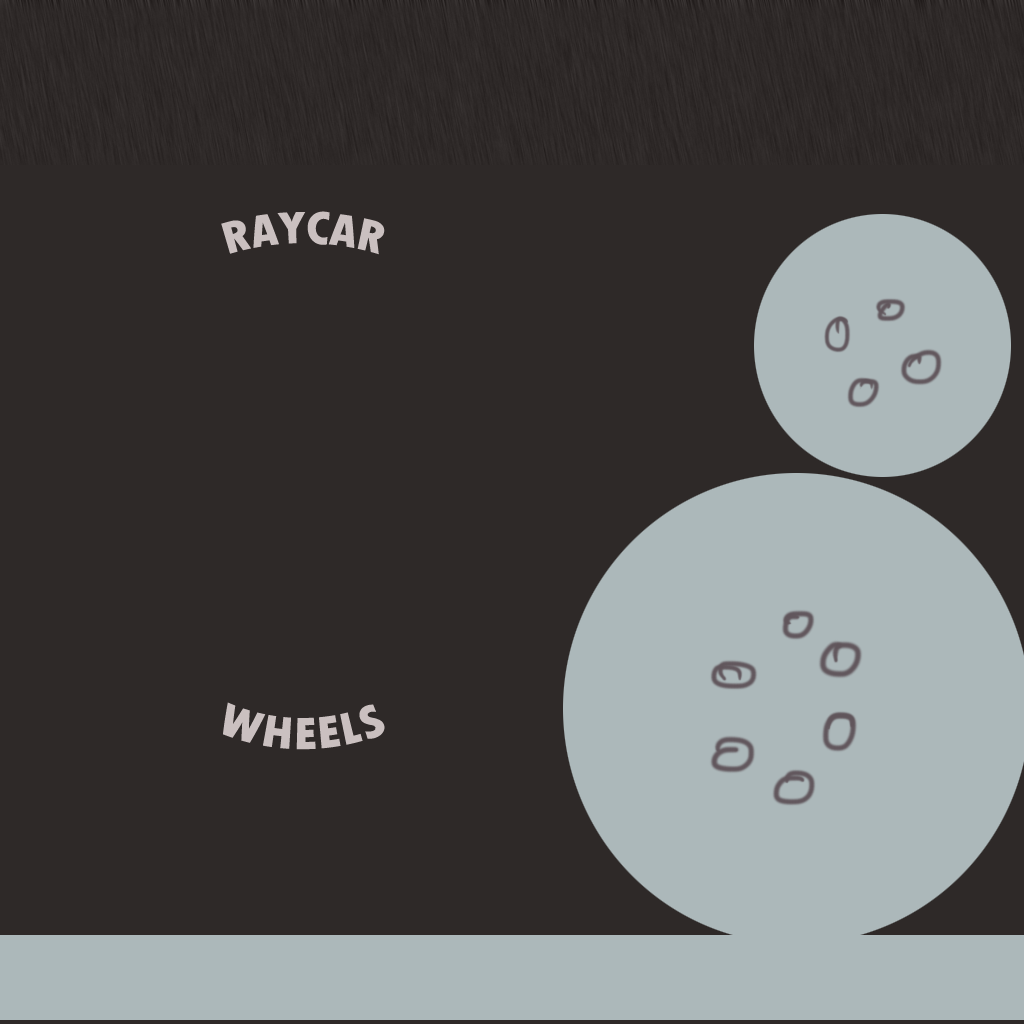
<style>
.page{position:relative;width:1024px;height:1024px;background:#2e2928}
.page>*{position:absolute;margin:0}
.t1{font:48px "TwCenMT-CondensedExtraBold";color:#cac0c0}
</style>
<div class="page">
<p class="t1" style="left:221px;top:211px;width:164px;height:44px">RAYCAR</p>
<p class="t1" style="left:223px;top:702px;width:162px;height:48px">WHEELS</p>
</div>
